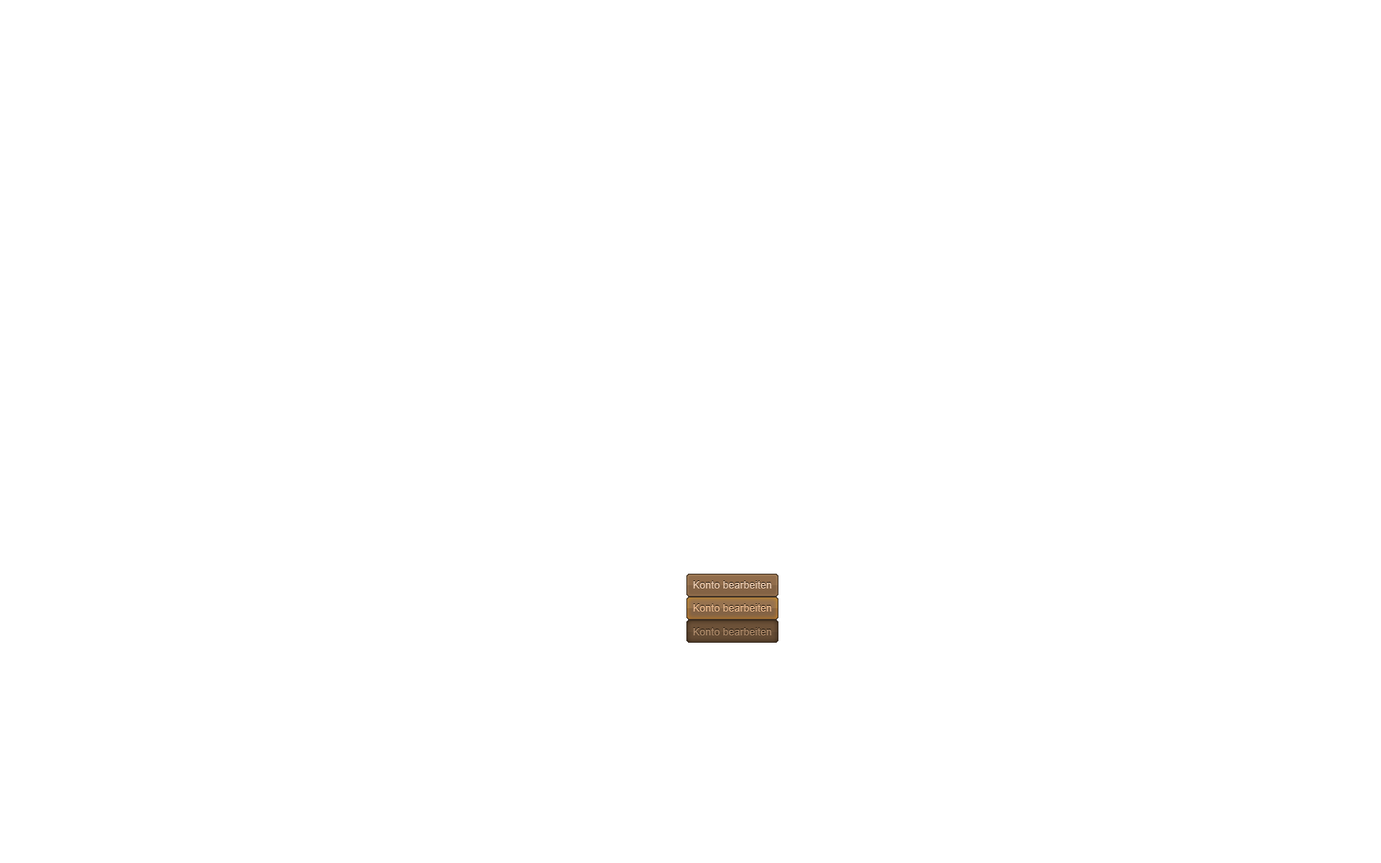
<style>
.page{position:relative;width:1381px;height:863px;background:#ffffff}
.page>*{position:absolute;margin:0}
.t1{font:9.9px "ArialMT";letter-spacing:0.025em;color:#efcfb1}
.t2{font:9.9px "ArialMT";letter-spacing:0.025em;color:#edbc90}
.t3{font:9.9px "ArialMT";letter-spacing:0.025em;color:#af8b6a}
</style>
<div class="page">
<p class="t1" style="left:693px;top:581px;width:79px;height:8px">Konto bearbeiten</p>
<p class="t2" style="left:693px;top:604px;width:79px;height:8px">Konto bearbeiten</p>
<p class="t3" style="left:693px;top:628px;width:79px;height:8px">Konto bearbeiten</p>
</div>
